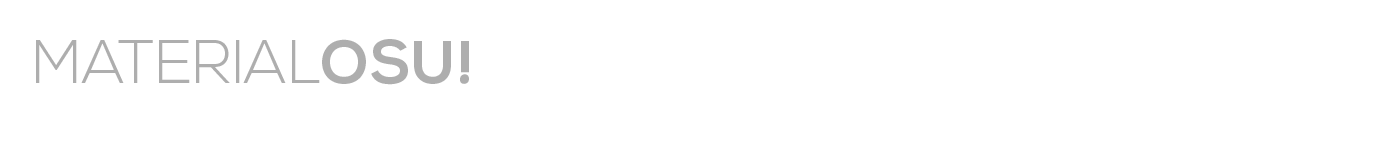
<style>
.page{position:relative;width:1390px;height:150px;background:#ffffff}
.page>*{position:absolute;margin:0}
.t1{font:60.7px "NexaLight";color:#aeaeae}
.t2{font:60.7px "NexaBold";color:#aeaeae}
</style>
<div class="page">
<p class="t1" style="left:36px;top:39px;width:433px;height:46px"><span class="t2">!</span>MATERIAL<span class="t2">OSU</span></p>
</div>
